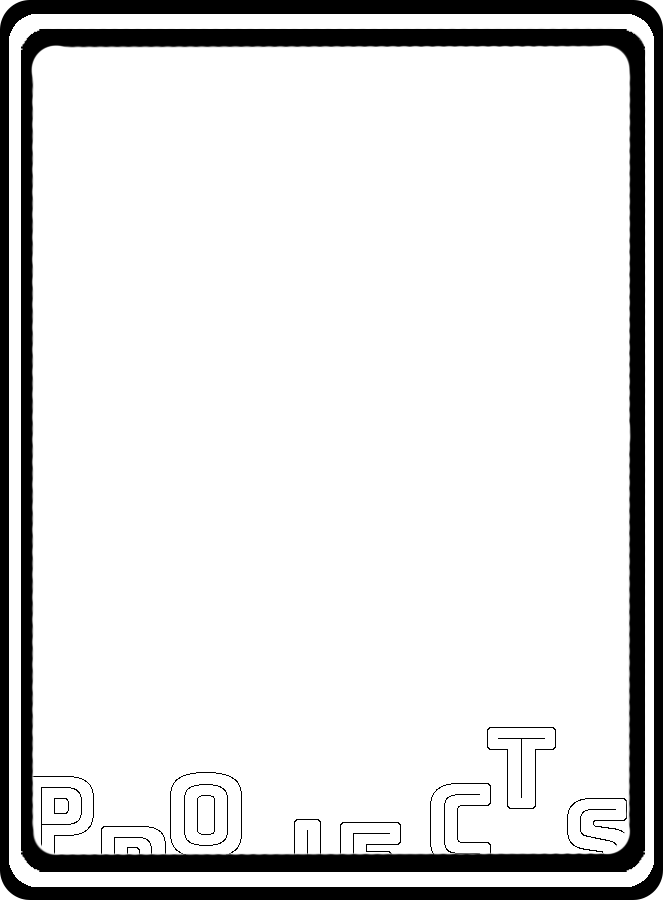
<style>
.page{position:relative;width:663px;height:900px;background:#ffffff}
.page>*{position:absolute;margin:0}
.t1{font:111.3px "Bungee-Outline";color:#000000}
</style>
<div class="page">
<p class="t1" style="left:487px;top:727px;width:69px;height:82px">T</p>
<p class="t1" style="left:170px;top:772px;width:72px;height:86px">O</p>
<p class="t1" style="left:28px;top:776px;width:66px;height:82px">P</p>
<p class="t1" style="left:430px;top:783px;width:61px;height:82px">C</p>
<p class="t1" style="left:567px;top:798px;width:64px;height:82px">S</p>
</div>
